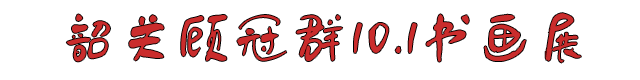
<style>
.page{position:relative;width:640px;height:80px;background:#ffffff}
.page>*{position:absolute;margin:0}
.t1{font:55px "FZZJ-TTMBFONT";letter-spacing:0.05em;color:#ca2c2c}
</style>
<div class="page">
<p class="t1" style="left:66px;top:13px;width:515px;height:50px">韶关顾冠群10.1书画展</p>
</div>
